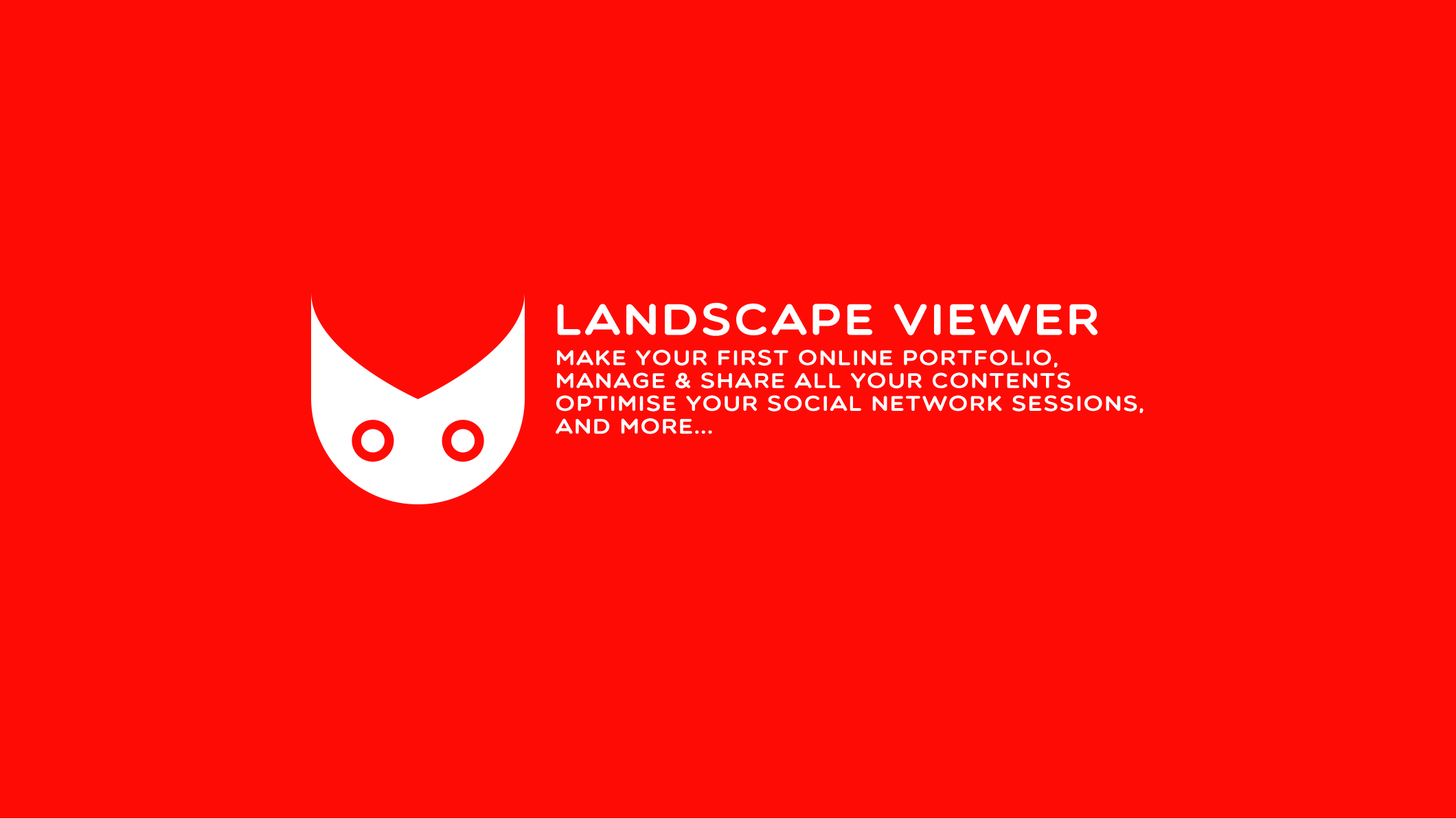
<style>
.page{position:relative;width:1456px;height:819px;background:#ff0b06}
.page>*{position:absolute;margin:0}
.t1{font:44.4px "Multicolore";letter-spacing:0.045em;color:#ffffff;scale:1.11 1}
.t2{font:21.5px/35.8px "Multicolore";letter-spacing:0.045em;color:#ffffff;scale:1.11 1}
</style>
<div class="page">
<p class="t1" style="left:557px;top:302px;width:541px;height:34px">LANDSCAPE VIEWER</p>
<p class="t2" style="left:556px;top:350px;width:588px;height:84px">Make your first online portfolio,<br>Manage &amp; Share All your Contents<br>OPTIMISE your social network sessions,<br>and more...</p>
</div>
